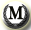
<style>
.page{position:relative;width:31px;height:30px}
.page>*{position:absolute;margin:0}
.t1{font:18.4px "BaskOldFace";color:#0b0b04;font-weight:bold;scale:0.9 1}
</style>
<div class="page">
<p class="t1" style="left:8px;top:6px;width:15px;height:14px">M</p>
</div>
